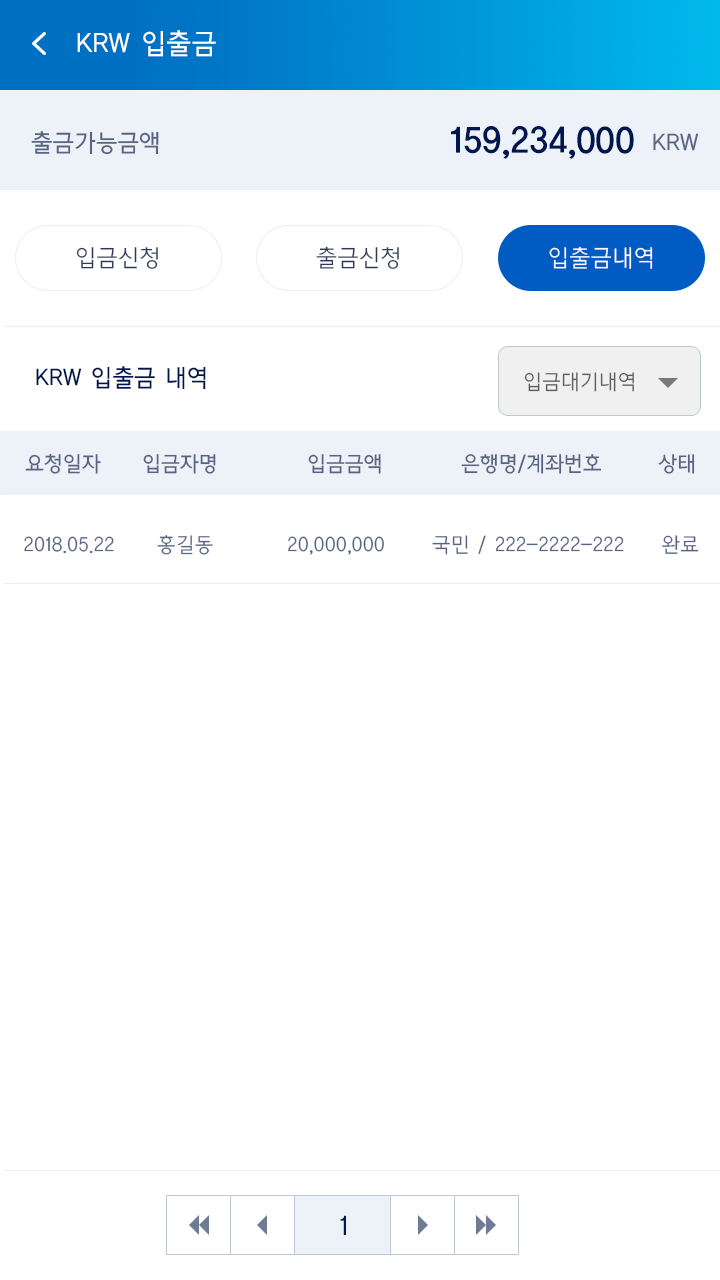
<style>
.page{position:relative;width:720px;height:1280px;background:#ffffff}
.page>*{position:absolute;margin:0}
.t1{font:28px "CreGoM";color:#ffffff}
.t2{font:36px "CreGoB";color:#00164f}
.t3{font:24px "CreGoM";color:#586481}
.t4{font:24px "CreGoL";color:#2f3b56}
.t5{font:24px "CreGoL";color:#ffffff}
.t6{font:24px "CreGoM";color:#00164f}
.t7{font:21px "CreGoL";color:#5f5f5f}
.t8{font:21px "CreGoM";color:#586481}
.t9{font:21px "CreGoL";color:#586481}
.t10{font:28px "CreGoM";color:#00164f}
</style>
<div class="page">
<p class="t1" style="left:77px;top:30px;width:139px;height:27px">KRW 입출금</p>
<p class="t2" style="left:451px;top:126px;width:183px;height:33px">159,234,000</p>
<p class="t3" style="left:31px;top:131px;width:128px;height:24px">출금가능금액</p>
<p class="t3" style="left:653px;top:133px;width:45px;height:18px">KRW</p>
<p class="t4" style="left:316px;top:246px;width:83px;height:23px">출금신청</p>
<p class="t5" style="left:549px;top:246px;width:104px;height:23px">입출금내역</p>
<p class="t4" style="left:76px;top:247px;width:82px;height:22px">입금신청</p>
<p class="t6" style="left:36px;top:366px;width:170px;height:24px">KRW 입출금 내역</p>
<p class="t7" style="left:524px;top:372px;width:110px;height:20px">입금대기내역</p>
<p class="t8" style="left:25px;top:453px;width:76px;height:21px">요청일자</p>
<p class="t8" style="left:143px;top:454px;width:73px;height:20px">입금자명</p>
<p class="t8" style="left:308px;top:454px;width:73px;height:20px">입금금액</p>
<p class="t8" style="left:461px;top:454px;width:141px;height:20px">은행명/계좌번호</p>
<p class="t8" style="left:658px;top:454px;width:37px;height:20px">상태</p>
<p class="t9" style="left:24px;top:536px;width:90px;height:18px">2018.05.22</p>
<p class="t9" style="left:157px;top:535px;width:56px;height:20px">홍길동</p>
<p class="t9" style="left:288px;top:536px;width:96px;height:19px">20,000,000</p>
<p class="t9" style="left:432px;top:535px;width:192px;height:20px">국민 / 222-2222-222</p>
<p class="t9" style="left:662px;top:535px;width:37px;height:19px">완료</p>
<p class="t10" style="left:340px;top:1215px;width:6px;height:20px">1</p>
</div>
